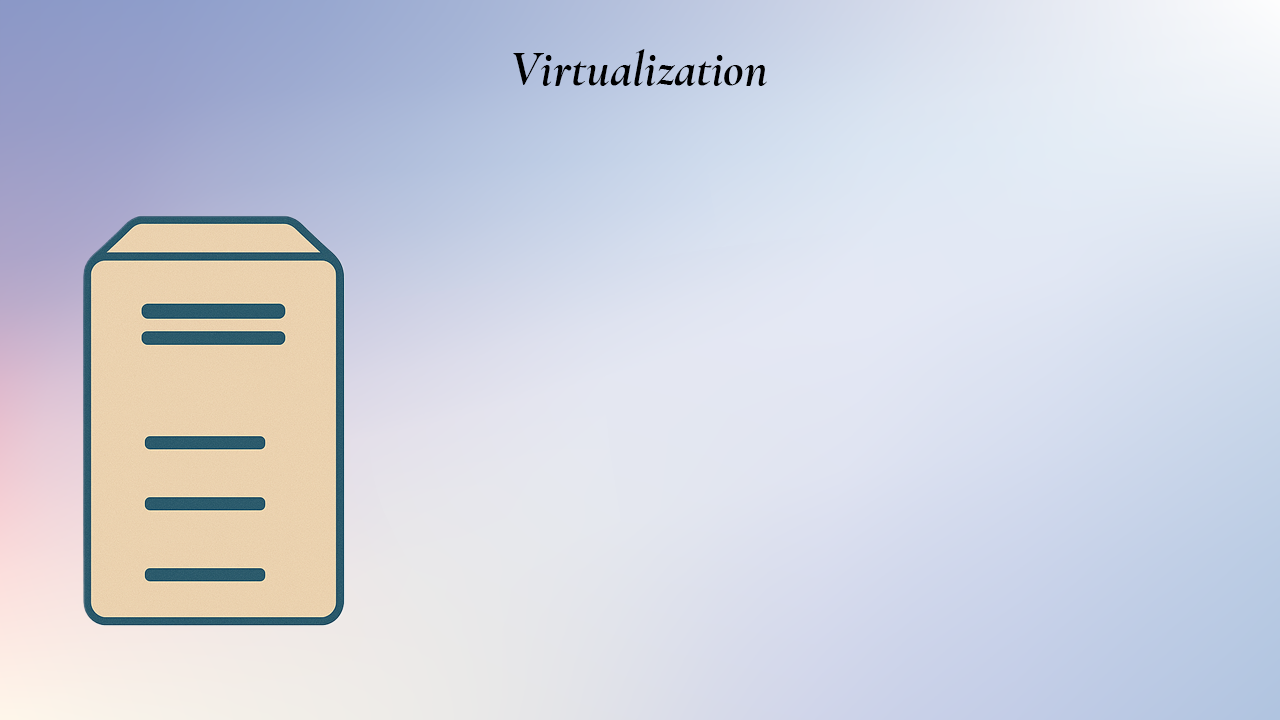
<style>
.page{position:relative;width:1280px;height:720px}
.page>*{position:absolute;margin:0}
.t1{font:50.1px "CormorantGaramond-BoldItalic";color:#000000}
</style>
<div class="page">
<p class="t1" style="left:513px;top:49px;width:254px;height:37px">Virtualization</p>
</div>
